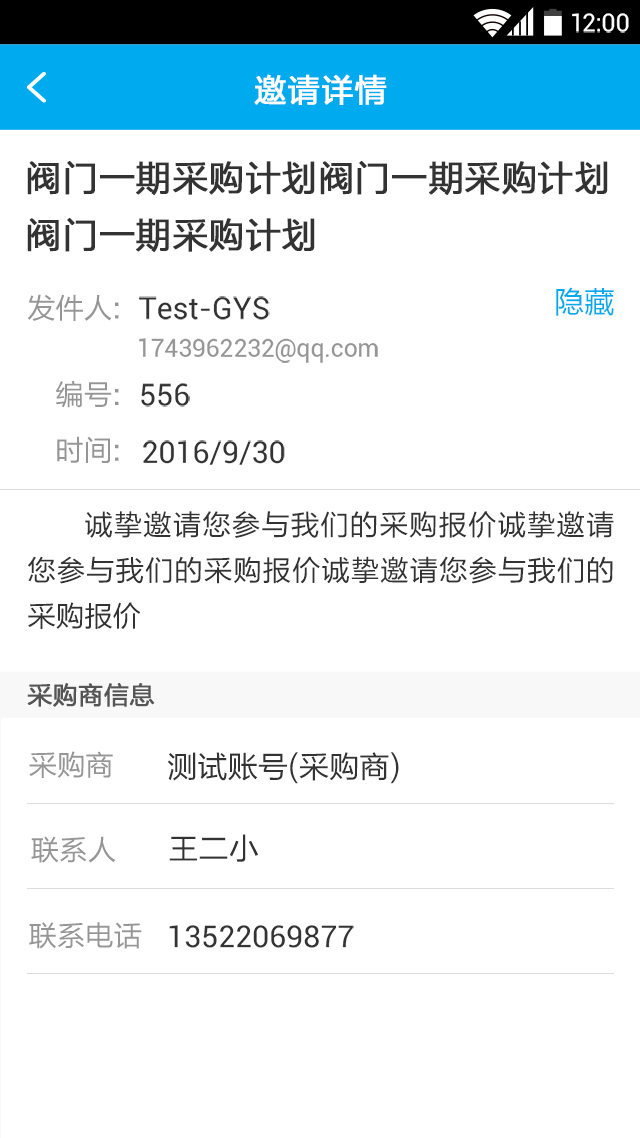
<style>
.page{position:relative;width:640px;height:1138px;background:#ffffff}
.page>*{position:absolute;margin:0}
.t1{font:24.9px "Roboto-Regular";color:#ffffff}
.t2{font:32px "FZLTHJW--GB1-0";letter-spacing:0.02em;color:#ffffff;font-weight:bold}
.t3{font:35.6px/56.9px "FZLTHJW--GB1-0";letter-spacing:0.001em;color:#333333;font-weight:bold}
.t4{font:28.4px "FZLTHJW--GB1-0";color:#969696}
.t5{font:30.2px "FZLTHJW--GB1-0";color:#00aaee}
.t6{font:30.2px "Roboto-Regular";color:#333333}
.t7{font:24.9px "Roboto-Regular";letter-spacing:-0.01em;color:#969696;text-transform:uppercase}
.t8{font:24.9px "Roboto-Regular";letter-spacing:-0.01em;color:#969696}
.t9{font:28.4px/45.6px "FZLTHJW--GB1-0";color:#333333}
.t10{font:24.9px "FZLTHJW--GB1-0";color:#555555;font-weight:bold}
.t11{font:30.2px "FZLTHJW--GB1-0";color:#333333}
</style>
<div class="page">
<p class="t1" style="left:572px;top:13px;width:57px;height:20px">12:00</p>
<p class="t2" style="left:254px;top:74px;width:133px;height:31px">邀请详情</p>
<p class="t3" style="left:27px;top:161px;width:581px;height:91px">阀门一期采购计划阀门一期采购计划<br>阀门一期采购计划</p>
<p class="t4" style="left:27px;top:294px;width:92px;height:27px">发件人:</p>
<p class="t5" style="left:556px;top:287px;width:58px;height:29px">隐藏</p>
<p class="t6" style="left:139px;top:296px;width:131px;height:24px">Test-GYS</p>
<p class="t7" style="left:139px;top:338px;width:239px;height:25px">1743962232@<span class="t8">qq.com</span></p>
<p class="t4" style="left:56px;top:381px;width:63px;height:27px">编号:</p>
<p class="t6" style="left:141px;top:383px;width:49px;height:24px">556</p>
<p class="t4" style="left:57px;top:436px;width:62px;height:27px">时间:</p>
<p class="t6" style="left:143px;top:440px;width:142px;height:25px">2016/9/30</p>
<p class="t9" style="left:28px;top:511px;width:586px;height:118px;text-align:justify">诚挚邀请您参与我们的采购报价诚挚邀请您参与我们的采购报价诚挚邀请您参与我们的采购报价</p>
<p class="t10" style="left:27px;top:683px;width:128px;height:24px">采购商信息</p>
<p class="t4" style="left:29px;top:751px;width:84px;height:27px">采购商</p>
<p class="t11" style="left:167px;top:752px;width:232px;height:32px">测试账号(采购商)</p>
<p class="t4" style="left:31px;top:836px;width:85px;height:27px">联系人</p>
<p class="t11" style="left:169px;top:834px;width:89px;height:28px">王二小</p>
<p class="t4" style="left:29px;top:922px;width:113px;height:27px">联系电话</p>
<p class="t6" style="left:169px;top:925px;width:185px;height:23px">13522069877</p>
</div>
